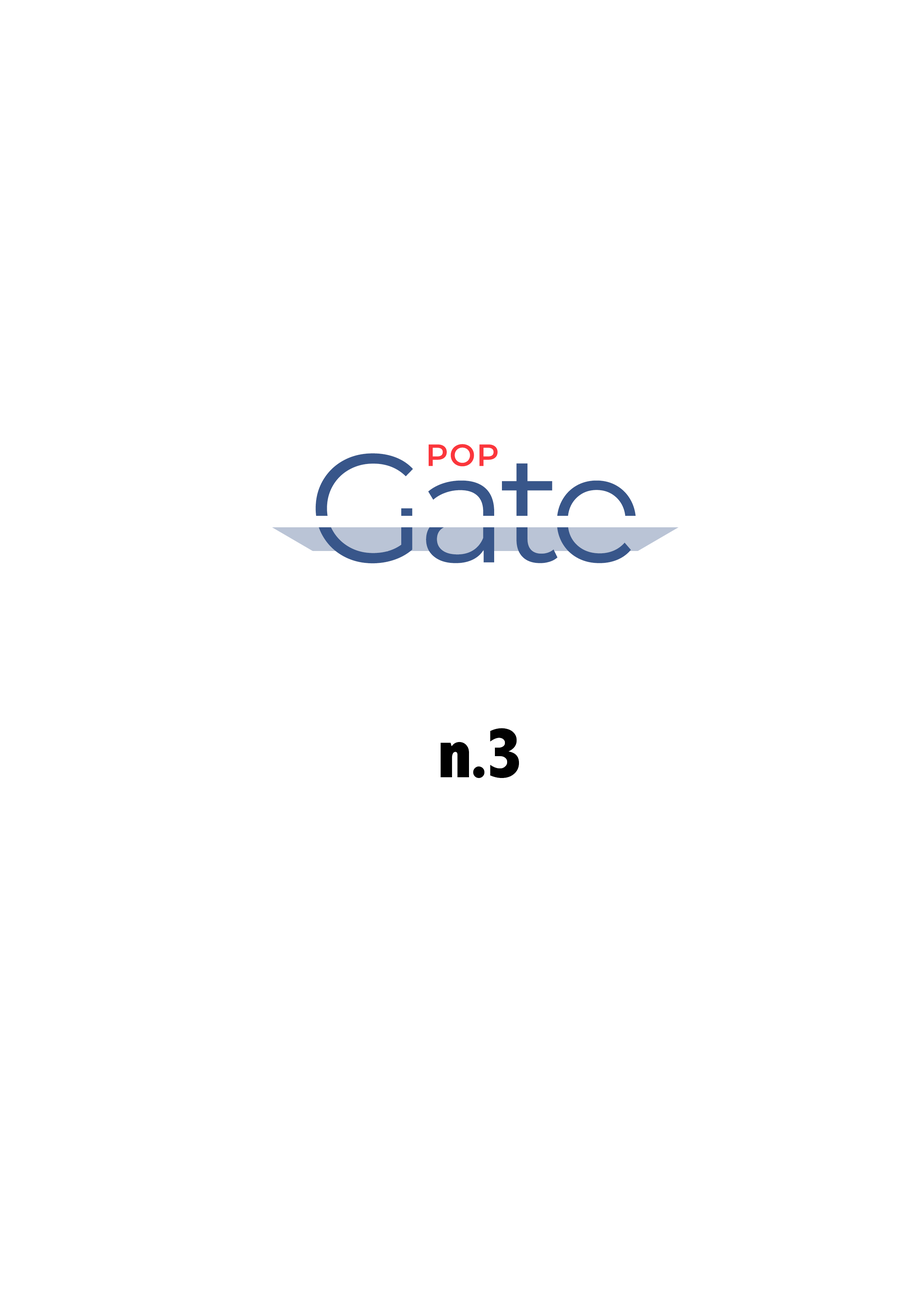
<style>
.page{position:relative;width:918px;height:1299px;background:#ffffff}
.page>*{position:absolute;margin:0}
.t1{font:30.9px "Montserrat-SemiBold";letter-spacing:0.04em;color:#fb363c}
.t2{font:154.3px "Montserrat-Regular";letter-spacing:-0.06em;color:#38568a}
.t3{font:74px "AbadiMT-CondensedExtraBold";letter-spacing:-0.06em;color:#010101}
</style>
<div class="page">
<p class="t1" style="left:429px;top:444px;width:69px;height:22px">POP</p>
<p class="t2" style="left:315px;top:453px;width:321px;height:110px">Gate</p>
<p class="t3" style="left:441px;top:728px;width:78px;height:50px">n.3</p>
</div>
